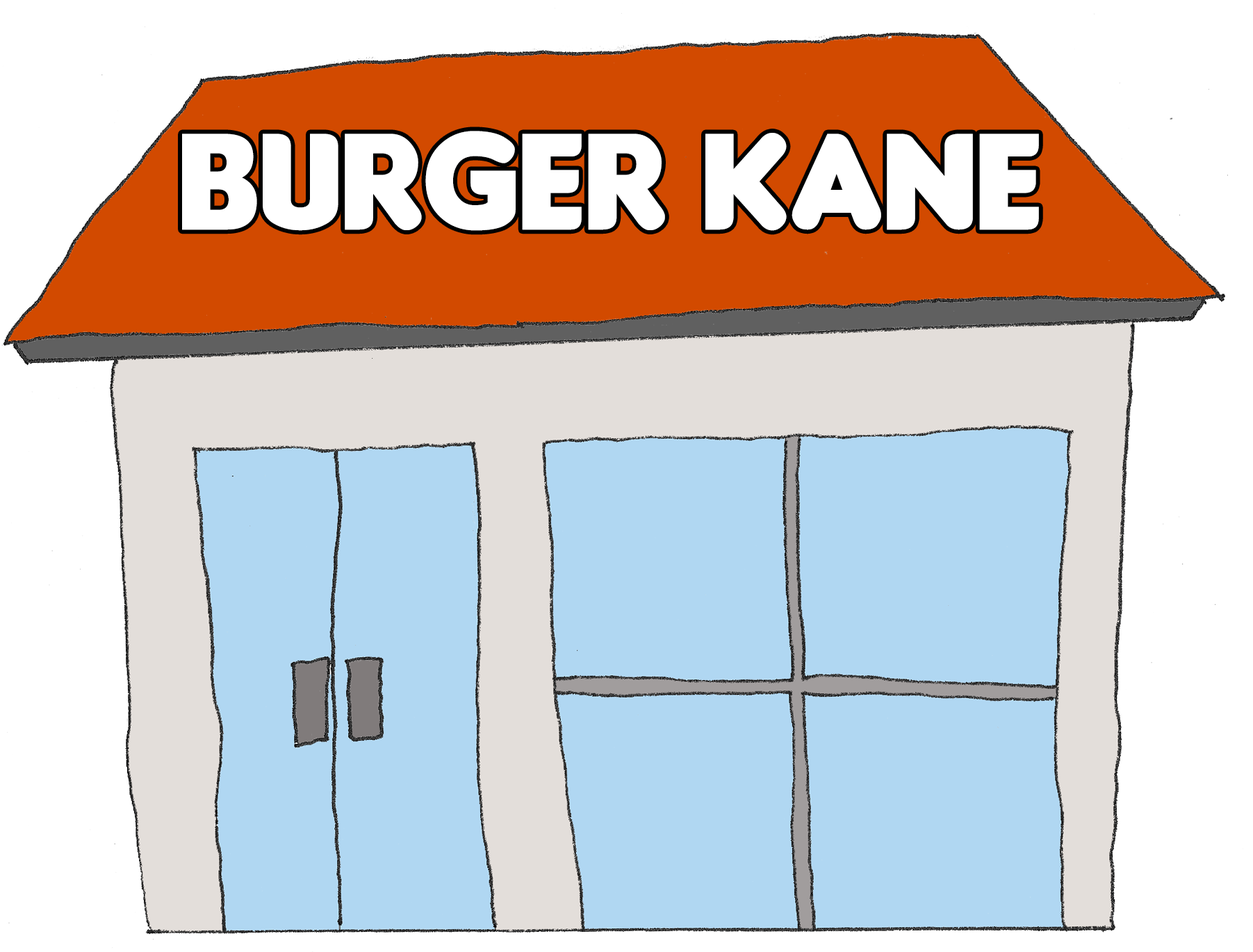
<style>
.page{position:relative;width:1253px;height:952px;background:#ffffff}
.page>*{position:absolute;margin:0}
.t1{font:144.9px "Insaniburger-with-Cheese";color:#ffffff}
</style>
<div class="page">
<p class="t1" style="left:182px;top:131px;width:857px;height:100px">burger kane</p>
</div>
